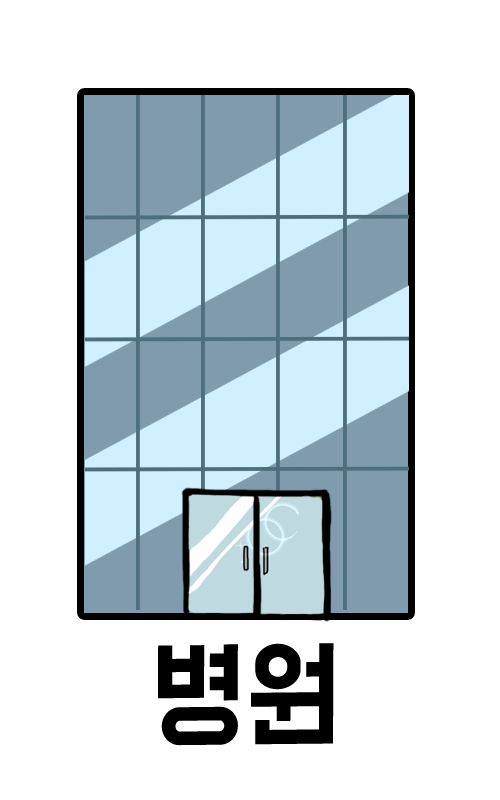
<style>
.page{position:relative;width:500px;height:800px;background:#ffffff}
.page>*{position:absolute;margin:0}
.t1{font:105.8px "BMDoHyeon";color:#000000;scale:0.94 1}
</style>
<div class="page">
<p class="t1" style="left:158px;top:643px;width:176px;height:103px;rotate:-1deg">병원</p>
</div>
